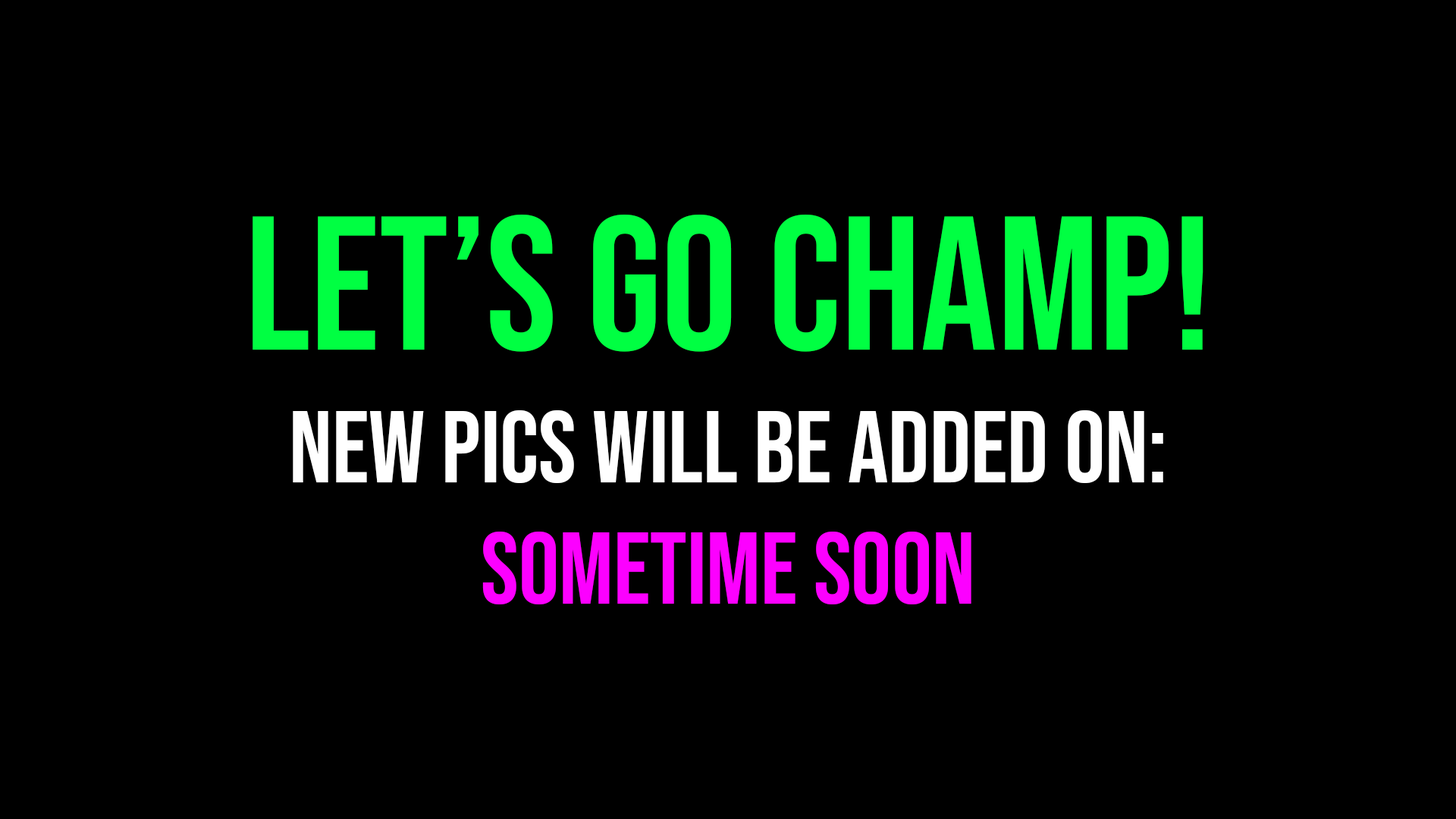
<style>
.page{position:relative;width:1456px;height:819px;background:#000000}
.page>*{position:absolute;margin:0}
.t1{font:190.1px "BebasNeue-Regular";color:#00ff42}
.t2{font:101.1px "BebasNeue-Regular";color:#ffffff}
.t3{font:101.1px "BebasNeue-Regular";color:#fc00ff}
</style>
<div class="page">
<p class="t1" style="left:253px;top:215px;width:950px;height:137px">LET’S GO CHAMP!</p>
<p class="t2" style="left:293px;top:410px;width:870px;height:194px;text-align:center">NEW PICS WILL BE ADDED ON:<br><span class="t3">SOMETIME SOON</span></p>
</div>
